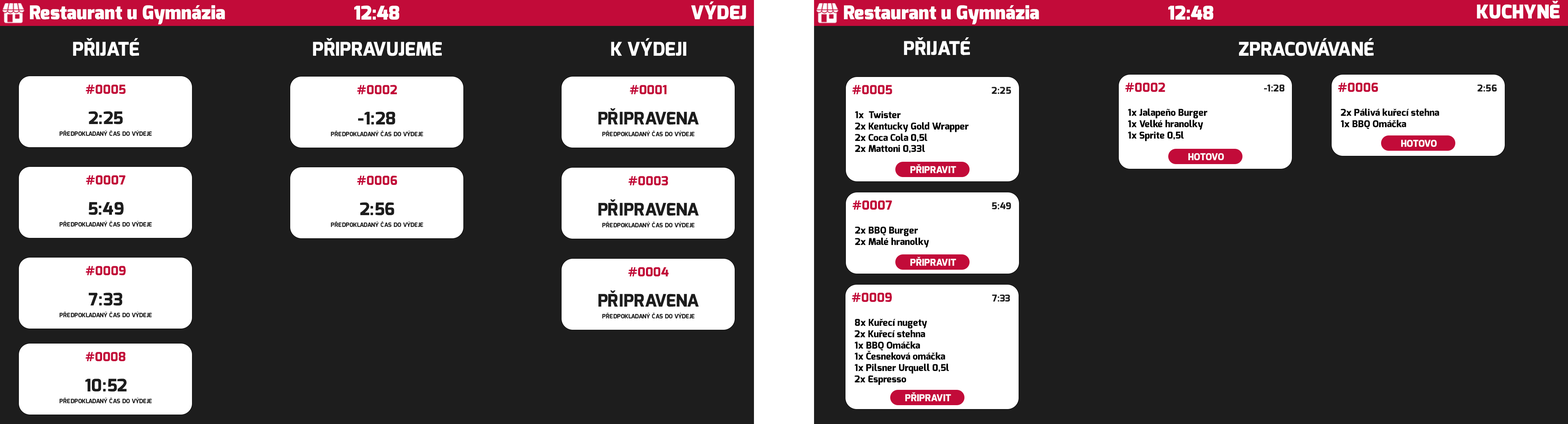
<style>
.page{position:relative;width:1568px;height:424px;background:#1d1d1d}
.page>*{position:absolute;margin:0}
.t1{font:18.8px "Exo-Black";color:#ffffff}
.t2{font:18.8px "Exo-ExtraBold";color:#ffffff}
.t3{font:12.6px "Exo-ExtraBold";color:#c20b39}
.t4{font:9.4px "Exo-ExtraBold";color:#1d1d1d}
.t5{font:17.3px "Exo-ExtraBold";color:#1d1d1d}
.t6{font:9.4px "Exo-ExtraBold";color:#000000}
.t7{font:6px "Exo-ExtraBold";color:#1d1d1d}
.t8{font:9.4px "Exo-ExtraBold";color:#ffffff}
</style>
<div class="page">
<p class="t1" style="left:30px;top:5px;width:195px;height:19px">Restaurant u Gymnázia</p>
<p class="t1" style="left:354px;top:5px;width:45px;height:15px">12:48</p>
<p class="t1" style="left:691px;top:1px;width:55px;height:19px">VÝDEJ</p>
<p class="t1" style="left:844px;top:5px;width:195px;height:19px">Restaurant u Gymnázia</p>
<p class="t1" style="left:1168px;top:5px;width:45px;height:15px">12:48</p>
<p class="t1" style="left:1477px;top:1px;width:83px;height:18px">KUCHYNĚ</p>
<p class="t2" style="left:73px;top:38px;width:66px;height:18px">PŘIJATÉ</p>
<p class="t2" style="left:313px;top:38px;width:129px;height:18px">PŘIPRAVUJEME</p>
<p class="t2" style="left:611px;top:38px;width:75px;height:18px">K VÝDEJI</p>
<p class="t2" style="left:904px;top:37px;width:66px;height:18px">PŘIJATÉ</p>
<p class="t2" style="left:1239px;top:38px;width:135px;height:18px">ZPRACOVÁVANÉ</p>
<p class="t3" style="left:86px;top:84px;width:40px;height:10px">#0005</p>
<p class="t3" style="left:357px;top:85px;width:40px;height:9px">#0002</p>
<p class="t3" style="left:630px;top:85px;width:37px;height:9px">#0001</p>
<p class="t3" style="left:852px;top:85px;width:40px;height:10px">#0005</p>
<p class="t4" style="left:992px;top:87px;width:19px;height:7px">2:25</p>
<p class="t3" style="left:1125px;top:82px;width:40px;height:10px">#0002</p>
<p class="t4" style="left:1264px;top:84px;width:20px;height:7px">-1:28</p>
<p class="t3" style="left:1338px;top:82px;width:40px;height:10px">#0006</p>
<p class="t4" style="left:1477px;top:84px;width:20px;height:7px">2:56</p>
<p class="t5" style="left:89px;top:111px;width:34px;height:13px">2:25</p>
<p class="t5" style="left:358px;top:112px;width:37px;height:12px">-1:28</p>
<p class="t5" style="left:598px;top:108px;width:101px;height:17px">PŘIPRAVENA</p>
<p class="t6" style="left:855px;top:111px;width:114px;height:42px">1x  Twister<br>2x Kentucky Gold Wrapper<br>2x Coca Cola 0,5l<br>2x Mattoni 0,33l</p>
<p class="t6" style="left:1128px;top:108px;width:80px;height:33px">1x Jalapeño Burger<br>1x Velké hranolky<br>1x Sprite 0,5l</p>
<p class="t6" style="left:1341px;top:108px;width:98px;height:21px">2x Pálivá kuřecí stehna<br>1x BBQ Omáčka</p>
<p class="t7" style="left:59px;top:130px;width:93px;height:6px">PŘEDPOKLADANÝ ČAS DO VÝDEJE</p>
<p class="t7" style="left:331px;top:130px;width:92px;height:6px">PŘEDPOKLADANÝ ČAS DO VÝDEJE</p>
<p class="t7" style="left:602px;top:130px;width:93px;height:6px">PŘEDPOKLADANÝ ČAS DO VÝDEJE</p>
<p class="t8" style="left:1401px;top:140px;width:36px;height:7px">HOTOVO</p>
<p class="t8" style="left:1188px;top:153px;width:36px;height:7px">HOTOVO</p>
<p class="t8" style="left:910px;top:164px;width:46px;height:9px">PŘIPRAVIT</p>
<p class="t3" style="left:86px;top:175px;width:40px;height:10px">#0007</p>
<p class="t3" style="left:357px;top:176px;width:40px;height:9px">#0006</p>
<p class="t3" style="left:628px;top:176px;width:40px;height:10px">#0003</p>
<p class="t5" style="left:89px;top:202px;width:35px;height:13px">5:49</p>
<p class="t5" style="left:360px;top:202px;width:34px;height:14px">2:56</p>
<p class="t5" style="left:598px;top:199px;width:101px;height:17px">PŘIPRAVENA</p>
<p class="t3" style="left:853px;top:200px;width:39px;height:10px">#0007</p>
<p class="t4" style="left:992px;top:202px;width:19px;height:7px">5:49</p>
<p class="t7" style="left:59px;top:221px;width:93px;height:6px">PŘEDPOKLADANÝ ČAS DO VÝDEJE</p>
<p class="t7" style="left:331px;top:221px;width:92px;height:6px">PŘEDPOKLADANÝ ČAS DO VÝDEJE</p>
<p class="t7" style="left:602px;top:221px;width:93px;height:6px">PŘEDPOKLADANÝ ČAS DO VÝDEJE</p>
<p class="t6" style="left:855px;top:227px;width:74px;height:21px">2x BBQ Burger<br>2x Malé hranolky</p>
<p class="t8" style="left:910px;top:257px;width:46px;height:9px">PŘIPRAVIT</p>
<p class="t3" style="left:86px;top:266px;width:40px;height:9px">#0009</p>
<p class="t3" style="left:628px;top:267px;width:41px;height:9px">#0004</p>
<p class="t5" style="left:89px;top:293px;width:34px;height:13px">7:33</p>
<p class="t5" style="left:598px;top:290px;width:101px;height:17px">PŘIPRAVENA</p>
<p class="t3" style="left:852px;top:293px;width:40px;height:9px">#0009</p>
<p class="t4" style="left:992px;top:295px;width:18px;height:7px">7:33</p>
<p class="t7" style="left:59px;top:311px;width:93px;height:6px">PŘEDPOKLADANÝ ČAS DO VÝDEJE</p>
<p class="t7" style="left:602px;top:313px;width:93px;height:5px">PŘEDPOKLADANÝ ČAS DO VÝDEJE</p>
<p class="t6" style="left:854px;top:319px;width:95px;height:66px">8x Kuřecí nugety<br>2x Kuřecí stehna<br>1x BBQ Omáčka<br>1x Česneková omáčka<br>1x Pilsner Urquell 0,5l<br>2x Espresso</p>
<p class="t3" style="left:86px;top:352px;width:40px;height:9px">#0008</p>
<p class="t5" style="left:85px;top:379px;width:42px;height:13px">10:52</p>
<p class="t7" style="left:59px;top:397px;width:93px;height:6px">PŘEDPOKLADANÝ ČAS DO VÝDEJE</p>
<p class="t8" style="left:905px;top:392px;width:46px;height:9px">PŘIPRAVIT</p>
</div>
